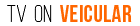
<style>
.page{position:relative;width:140px;height:26px;background:#ffffff}
.page>*{position:absolute;margin:0}
.t1{font:24px "BebasNeueBold";letter-spacing:0.014em;color:#ff6600}
.t2{font:24px "BebasNeueLight";color:#000000}
</style>
<div class="page">
<p class="t1" style="left:7px;top:5px;width:125px;height:17px"><span class="t2">TV  ON  </span>VEICULAR</p>
</div>
